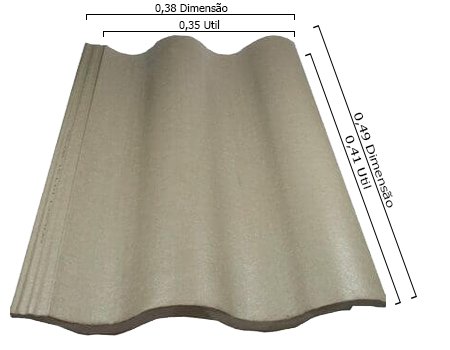
<style>
.page{position:relative;width:450px;height:350px;background:#ffffff}
.page>*{position:absolute;margin:0}
.t1{font:11px "Tahoma";color:#030303}
.t2{font:11px "Tahoma";color:#030303;scale:1.39 1}
</style>
<div class="page">
<p class="t1" style="left:155px;top:3px;width:73px;height:11px">0,38 Dimensão</p>
<p class="t1" style="left:179px;top:20px;width:41px;height:11px">0,35 Util</p>
<p class="t2" style="left:354px;top:112px;width:39px;height:96px;rotate:70deg">0,49 Dimensão</p>
<p class="t2" style="left:345px;top:135px;width:27px;height:55px;rotate:70deg">0,41 Util</p>
</div>
